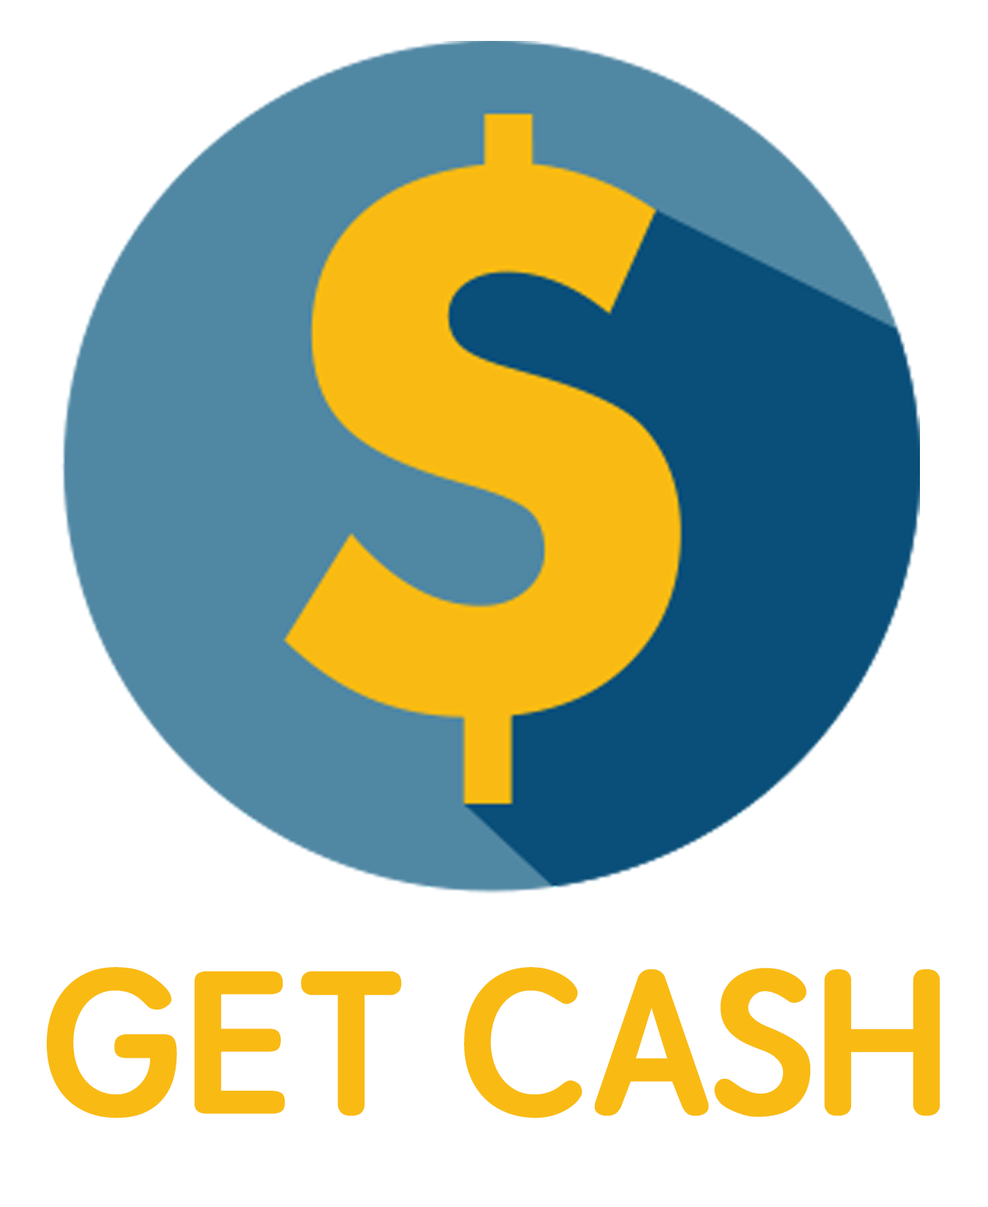
<style>
.page{position:relative;width:988px;height:1207px;background:#ffffff}
.page>*{position:absolute;margin:0}
.t1{font:204.3px "STYuanti-SC-Bold";color:#f9bb13}
</style>
<div class="page">
<p class="t1" style="left:46px;top:967px;width:894px;height:152px">GET CASH</p>
</div>
